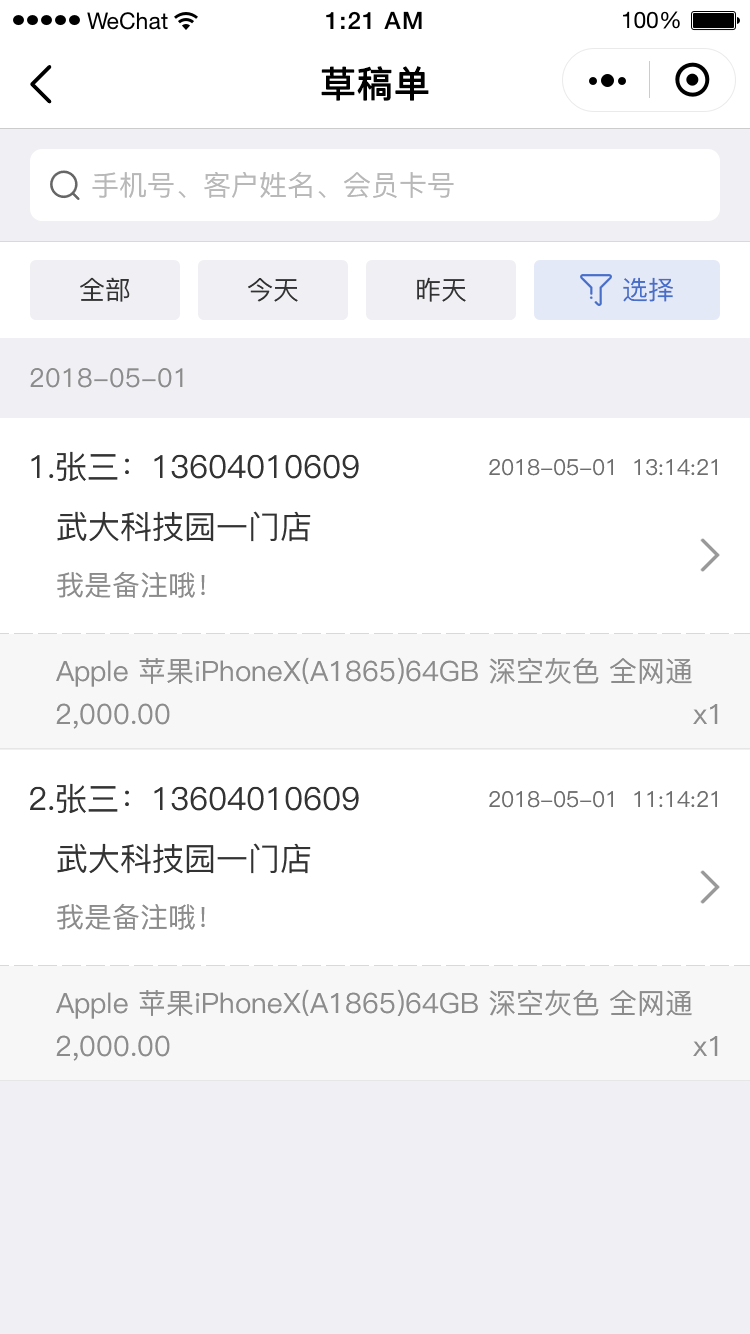
<style>
.page{position:relative;width:750px;height:1334px;background:#ffffff}
.page>*{position:absolute;margin:0}
.t1{font:36px "PingFang-SC-Medium";color:#000000;font-weight:bold}
.t2{font:28px "PingFang-SC-Medium";color:#b8b8b8}
.t3{font:26px "PingFang-SC-Medium";color:#333333}
.t4{font:26px "PingFang-SC-Medium";color:#476ec9}
.t5{font:26px "PingFang-SC-Medium";color:#8c8c8c}
.t6{font:32px "PingFang-SC-Medium";color:#333333}
.t7{font:22px "PingFang-SC-Medium";color:#6e6e6e}
.t8{font:28px "PingFang-SC-Medium";color:#8c8c8c}
</style>
<div class="page">
<p class="t1" style="left:321px;top:66px;width:108px;height:35px">草稿单</p>
<p class="t2" style="left:92px;top:172px;width:362px;height:26px">手机号、客户姓名、会员卡号</p>
<p class="t3" style="left:80px;top:277px;width:50px;height:25px">全部</p>
<p class="t3" style="left:248px;top:278px;width:50px;height:24px">今天</p>
<p class="t3" style="left:417px;top:277px;width:49px;height:25px">昨天</p>
<p class="t4" style="left:623px;top:277px;width:50px;height:25px">选择</p>
<p class="t5" style="left:30px;top:368px;width:153px;height:20px">2018-05-01</p>
<p class="t6" style="left:31px;top:451px;width:328px;height:31px">1.张三：13604010609</p>
<p class="t7" style="left:489px;top:459px;width:228px;height:17px">2018-05-01  13:14:21</p>
<p class="t6" style="left:57px;top:511px;width:254px;height:31px">武大科技园一门店</p>
<p class="t8" style="left:57px;top:571px;width:148px;height:27px">我是备注哦！</p>
<p class="t8" style="left:56px;top:657px;width:636px;height:30px">Apple 苹果iPhoneX(A1865)64GB 深空灰色 全网通</p>
<p class="t8" style="left:56px;top:703px;width:114px;height:26px">2,000.00</p>
<p class="t8" style="left:693px;top:704px;width:25px;height:20px">x1</p>
<p class="t6" style="left:30px;top:783px;width:329px;height:31px">2.张三：13604010609</p>
<p class="t7" style="left:489px;top:791px;width:228px;height:17px">2018-05-01  11:14:21</p>
<p class="t6" style="left:57px;top:843px;width:254px;height:31px">武大科技园一门店</p>
<p class="t8" style="left:57px;top:903px;width:148px;height:27px">我是备注哦！</p>
<p class="t8" style="left:56px;top:989px;width:636px;height:30px">Apple 苹果iPhoneX(A1865)64GB 深空灰色 全网通</p>
<p class="t8" style="left:56px;top:1035px;width:114px;height:26px">2,000.00</p>
<p class="t8" style="left:693px;top:1036px;width:25px;height:20px">x1</p>
</div>
